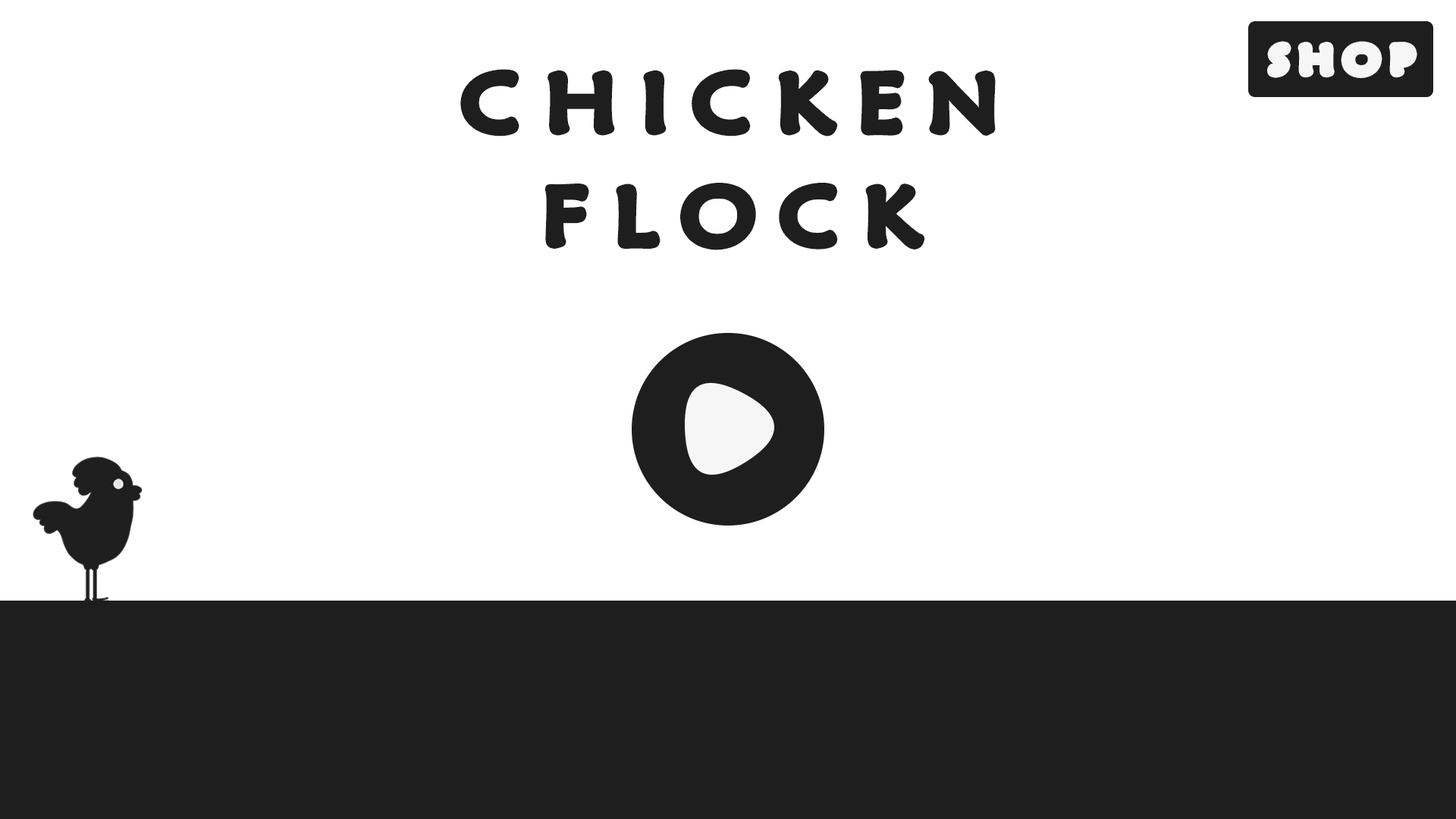
<style>
.page{position:relative;width:1456px;height:819px;background:#ffffff}
.page>*{position:absolute;margin:0}
.t1{font:36.5px "MaiandraGD-Regular";letter-spacing:0.28em;color:#f6f6f6;font-weight:bold;scale:1.11 1}
.t2{font:78.1px/113.3px "MaiandraGD-Regular";letter-spacing:0.28em;color:#1e1e1e;font-weight:bold;scale:1.11 1}
</style>
<div class="page">
<p class="t1" style="left:1272px;top:45px;width:141px;height:29px">SHOP</p>
<p class="t2" style="left:465px;top:74px;width:526px;height:172px;text-align:center">CHICKEN<br>FLOCK</p>
</div>
